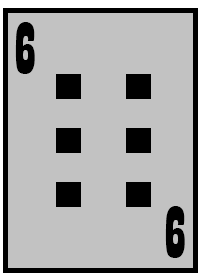
<style>
.page{position:relative;width:200px;height:280px;background:#c2c2c2}
.page>*{position:absolute;margin:0}
.t1{font:75px "Playbill";color:#000000}
</style>
<div class="page">
<p class="t1" style="left:15px;top:22px;width:20px;height:52px">6</p>
<p class="t1" style="left:165px;top:206px;width:20px;height:52px">6</p>
</div>
